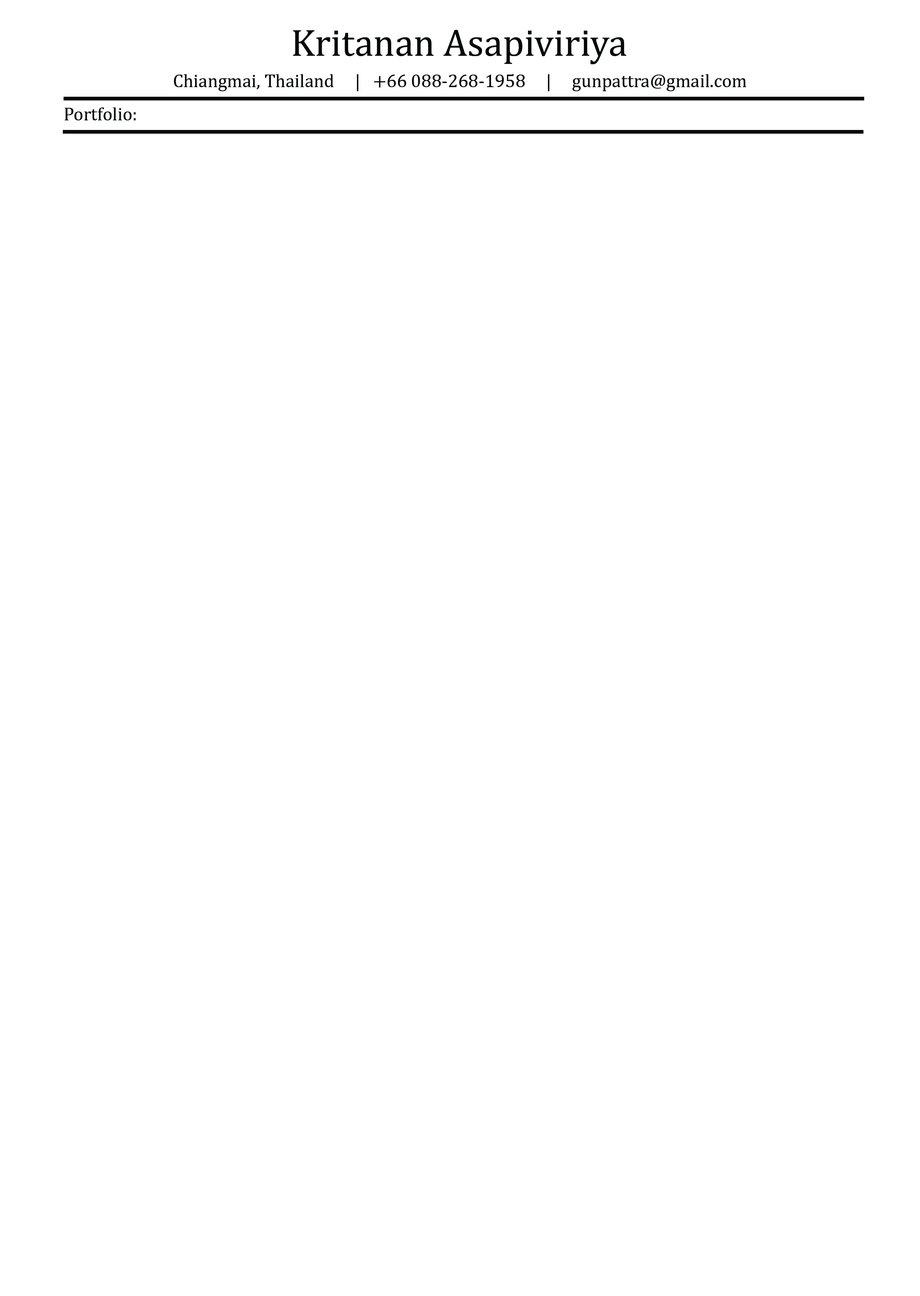
<style>
.page{position:relative;width:920px;height:1296px;background:#ffffff}
.page>*{position:absolute;margin:0}
.t1{font:38.5px "CambriaMath";color:#060808}
.t2{font:18.5px "CambriaMath";color:#060808}
</style>
<div class="page">
<p class="t1" style="left:293px;top:30px;width:333px;height:34px">Kritanan Asapiviriya</p>
<p class="t2" style="left:174px;top:74px;width:572px;height:17px">Chiangmai, Thailand     |   +66 088-268-1958     |     gunpattra@gmail.com</p>
<p class="t2" style="left:65px;top:107px;width:71px;height:13px">Portfolio:</p>
</div>
